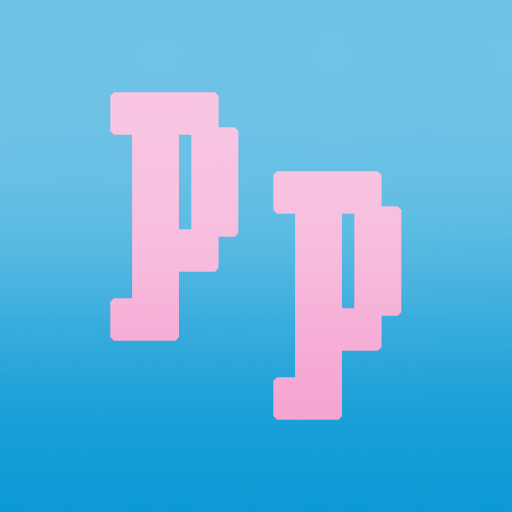
<style>
.page{position:relative;width:512px;height:512px}
.page>*{position:absolute;margin:0}
.t1{font:345.5px/79px "Superscript";letter-spacing:-0.035em;color:#f8bdde;font-weight:bold;scale:0.57 1}
</style>
<div class="page">
<p class="t1" style="left:110px;top:92px;width:292px;height:328px;text-align:center">P<br>   P</p>
</div>
